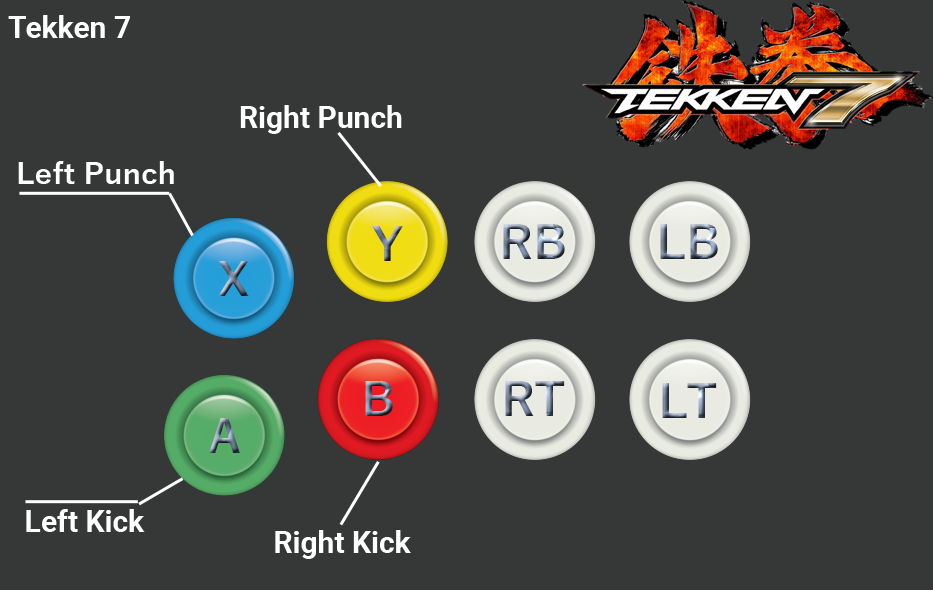
<style>
.page{position:relative;width:933px;height:590px;background:#363838}
.page>*{position:absolute;margin:0}
.t1{font:30px "Roboto-Bold";color:#ffffff}
.t2{font:30px "YuGothic-Bold";color:#ffffff}
</style>
<div class="page">
<p class="t1" style="left:8px;top:15px;width:122px;height:23px">Tekken 7</p>
<p class="t1" style="left:240px;top:105px;width:162px;height:29px">Right Punch</p>
<p class="t2" style="left:18px;top:161px;width:156px;height:23px">Left Punch</p>
<p class="t1" style="left:26px;top:509px;width:119px;height:23px">Left Kick</p>
<p class="t1" style="left:275px;top:530px;width:136px;height:29px">Right Kick</p>
</div>
